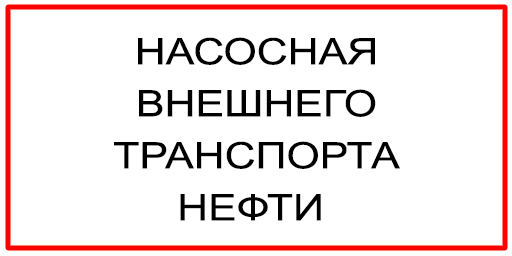
<style>
.page{position:relative;width:512px;height:256px;background:#ffffff}
.page>*{position:absolute;margin:0}
.t1{font:36.5px/52px "ArialMT";color:#000000;scale:1.17 1}
</style>
<div class="page">
<p class="t1" style="left:114px;top:37px;width:286px;height:184px;text-align:center">НАСОСНАЯ<br>ВНЕШНЕГО<br>ТРАНСПОРТА<br>НЕФТИ</p>
</div>
